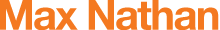
<style>
.page{position:relative;width:220px;height:30px;background:#ffffff}
.page>*{position:absolute;margin:0}
.t1{font:41.7px "HelveticaNeue-Bold";letter-spacing:-0.04em;color:#f47920}
</style>
<div class="page">
<p class="t1" style="left:0px;top:0px;width:219px;height:30px">Max Nathan</p>
</div>
